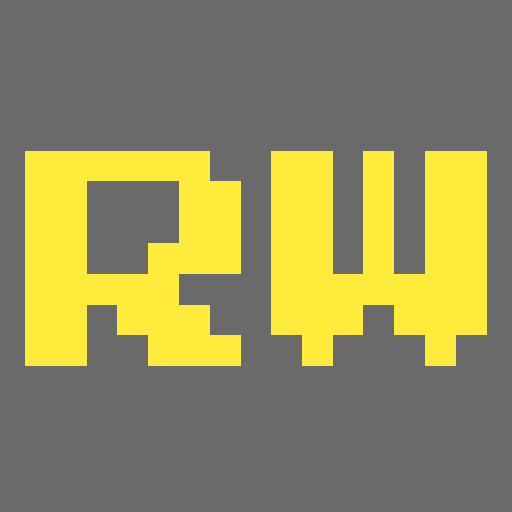
<style>
.page{position:relative;width:512px;height:512px;background:#6a6a6a}
.page>*{position:absolute;margin:0}
.t1{font:246.5px "PressStart2P-Regular";color:#ffeb3b}
</style>
<div class="page">
<p class="t1" style="left:25px;top:151px;width:462px;height:215px">RW</p>
</div>
